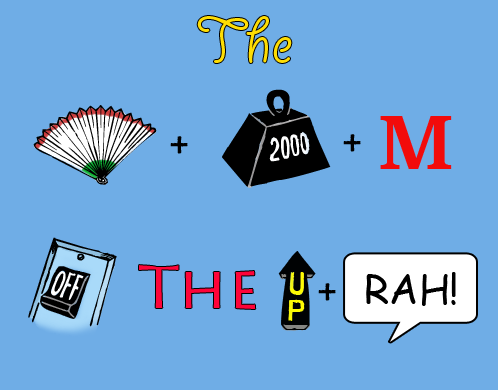
<style>
.page{position:relative;width:498px;height:390px;background:#6fade6}
.page>*{position:absolute;margin:0}
.t1{font:72px "GiddyupStd";color:#fedd03}
.t2{font:72px "Superclarendon-Regular";color:#f20b0b}
.t3{font:72px "RebusFont";color:#000000}
.t4{font:60px "LithosPro-Regular";color:#fe0338}
.t5{font:40px "ComicSansMS";color:#000000}
</style>
<div class="page">
<p class="t1" style="left:197px;top:16px;width:95px;height:47px">The</p>
<p class="t2" style="left:380px;top:116px;width:72px;height:53px">M</p>
<p class="t3" style="left:170px;top:136px;width:18px;height:18px">+</p>
<p class="t3" style="left:343px;top:134px;width:18px;height:18px">+</p>
<p class="t4" style="left:139px;top:265px;width:117px;height:44px">The</p>
<p class="t5" style="left:366px;top:272px;width:90px;height:34px">RAH!</p>
<p class="t3" style="left:318px;top:283px;width:18px;height:18px">+</p>
</div>
